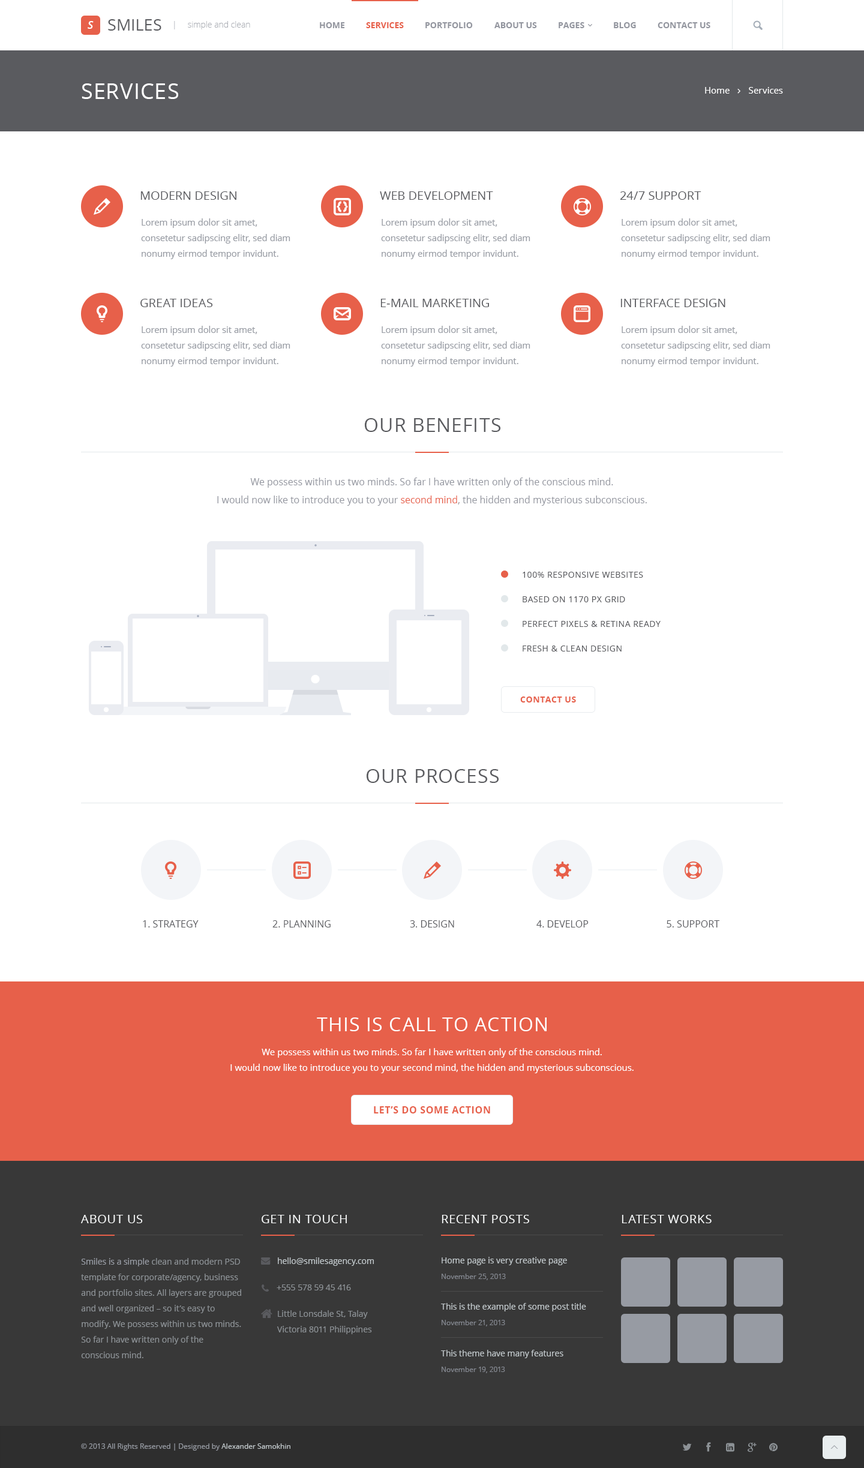
<style>
.page{position:relative;width:864px;height:1468px;background:#ffffff}
.page>*{position:absolute;margin:0}
.t1{font:10.8px "OpenSans-SemiboldItalic";color:#ffffff}
.t2{font:16.2px "OpenSans";color:#5a5b5f}
.t3{font:8.4px "OpenSans-Light";color:#abaeb5}
.t4{font:8.4px "OpenSans-Bold";color:#93969f}
.t5{font:8.4px "OpenSans-Bold";color:#e7604a}
.t6{font:21.6px "OpenSans";letter-spacing:0.04em;color:#ffffff}
.t7{font:9px "OpenSans";color:#ffffff}
.t8{font:12px "OpenSans";color:#5a5b5f;text-transform:uppercase}
.t9{font:9px/15.6px "OpenSans";color:#979ba3}
.t10{font:19.2px "OpenSans";letter-spacing:0.04em;color:#5a5b5f}
.t11{font:9.6px/18px "OpenSans";color:#93969f}
.t12{font:9.6px/18px "OpenSans";color:#e7604a}
.t13{font:8.4px "OpenSans";letter-spacing:0.04em;color:#5a5b5f}
.t14{font:8.4px "OpenSans-Bold";letter-spacing:0.04em;color:#e7604a}
.t15{font:9.6px "OpenSans";color:#5a5b5f;text-transform:uppercase}
.t16{font:19.2px "OpenSans";letter-spacing:0.04em;color:#ffffff}
.t17{font:9px/15.6px "OpenSans";color:#ffffff}
.t18{font:9.6px "OpenSans-Bold";letter-spacing:0.04em;color:#e7604a}
.t19{font:12px "OpenSans";letter-spacing:0.04em;color:#fafcfc}
.t20{font:8.4px/15.6px "OpenSans";color:#8c9195}
.t21{font:8.4px/15.6px "OpenSans";color:#979ba3}
.t22{font:8.4px "OpenSans";color:#c2c9cc}
.t23{font:8.4px/15.6px "OpenSans";color:#c2c9cc}
.t24{font:7.2px/15.6px "OpenSans";color:#848890}
.t25{font:8.4px "OpenSans";color:#8c9195}
.t26{font:7.2px "OpenSans";color:#979ba3}
.t27{font:7.2px "OpenSans";color:#c2c9cc}
</style>
<div class="page">
<p class="t1" style="left:88px;top:21px;width:6px;height:8px">S</p>
<p class="t2" style="left:108px;top:19px;width:53px;height:12px">SMILES</p>
<p class="t3" style="left:174px;top:21px;width:76px;height:8px">|     simple and clean</p>
<p class="t4" style="left:320px;top:22px;width:25px;height:6px">HOME</p>
<p class="t5" style="left:366px;top:22px;width:38px;height:6px">SERVICES</p>
<p class="t4" style="left:425px;top:22px;width:48px;height:6px">PORTFOLIO</p>
<p class="t4" style="left:494px;top:22px;width:43px;height:6px">ABOUT US</p>
<p class="t4" style="left:559px;top:22px;width:25px;height:6px">PAGES</p>
<p class="t4" style="left:614px;top:22px;width:22px;height:6px">BLOG</p>
<p class="t4" style="left:658px;top:22px;width:52px;height:6px">CONTACT US</p>
<p class="t6" style="left:82px;top:83px;width:96px;height:16px">SERVICES</p>
<p class="t7" style="left:705px;top:87px;width:78px;height:7px">Home        Services</p>
<p class="t8" style="left:140px;top:191px;width:96px;height:9px">Modern Design</p>
<p class="t8" style="left:380px;top:191px;width:113px;height:9px">web development</p>
<p class="t8" style="left:620px;top:191px;width:81px;height:9px">24/7 support</p>
<p class="t9" style="left:141px;top:218px;width:149px;height:41px">Lorem ipsum dolor sit amet, consetetur sadipscing elitr, sed diam nonumy eirmod tempor invidunt.</p>
<p class="t9" style="left:381px;top:218px;width:149px;height:41px">Lorem ipsum dolor sit amet, consetetur sadipscing elitr, sed diam nonumy eirmod tempor invidunt.</p>
<p class="t9" style="left:621px;top:218px;width:149px;height:41px">Lorem ipsum dolor sit amet, consetetur sadipscing elitr, sed diam nonumy eirmod tempor invidunt.</p>
<p class="t8" style="left:140px;top:299px;width:73px;height:8px">great ideas</p>
<p class="t8" style="left:380px;top:299px;width:109px;height:8px">E-MAIL MARKETING</p>
<p class="t8" style="left:620px;top:299px;width:105px;height:8px">Interface Design</p>
<p class="t9" style="left:141px;top:326px;width:149px;height:41px">Lorem ipsum dolor sit amet, consetetur sadipscing elitr, sed diam nonumy eirmod tempor invidunt.</p>
<p class="t9" style="left:381px;top:326px;width:149px;height:41px">Lorem ipsum dolor sit amet, consetetur sadipscing elitr, sed diam nonumy eirmod tempor invidunt.</p>
<p class="t9" style="left:621px;top:326px;width:149px;height:41px">Lorem ipsum dolor sit amet, consetetur sadipscing elitr, sed diam nonumy eirmod tempor invidunt.</p>
<p class="t10" style="left:365px;top:418px;width:135px;height:14px">OUR BENEFITS</p>
<p class="t11" style="left:217px;top:478px;width:430px;height:28px;text-align:center">We possess within us two minds. So far I have written only of the conscious mind.<br>I would now like to introduce you to your <span class="t12">second mind</span>, the hidden and mysterious subconscious.</p>
<p class="t13" style="left:523px;top:572px;width:120px;height:6px">100% RESPONSIVE WEBSITES</p>
<p class="t13" style="left:523px;top:596px;width:102px;height:6px">BASED ON 1170 PX GRID</p>
<p class="t13" style="left:523px;top:621px;width:138px;height:6px">PERFECT PIXELS &amp; RETINA READY</p>
<p class="t13" style="left:523px;top:646px;width:99px;height:6px">FRESH &amp; CLEAN DESIGN</p>
<p class="t14" style="left:520px;top:697px;width:56px;height:6px">CONTACT US</p>
<p class="t10" style="left:367px;top:769px;width:132px;height:14px">OUR PROCESS</p>
<p class="t15" style="left:143px;top:920px;width:56px;height:8px">1. Strategy</p>
<p class="t15" style="left:272px;top:920px;width:59px;height:8px">2. Planning</p>
<p class="t15" style="left:410px;top:920px;width:44px;height:8px">3. Design</p>
<p class="t15" style="left:536px;top:920px;width:53px;height:8px">4. Develop</p>
<p class="t15" style="left:667px;top:920px;width:53px;height:8px">5. Support</p>
<p class="t16" style="left:317px;top:1018px;width:230px;height:13px">THIS IS CALL TO ACTION</p>
<p class="t17" style="left:230px;top:1048px;width:404px;height:25px;text-align:center">We possess within us two minds. So far I have written only of the conscious mind.<br>I would now like to introduce you to your second mind, the hidden and mysterious subconscious.</p>
<p class="t18" style="left:374px;top:1106px;width:116px;height:8px">LET’S DO SOME ACTION</p>
<p class="t19" style="left:81px;top:1215px;width:62px;height:8px">ABOUT US</p>
<p class="t19" style="left:262px;top:1215px;width:85px;height:8px">GET IN TOUCH</p>
<p class="t19" style="left:442px;top:1215px;width:87px;height:8px">RECENT POSTS</p>
<p class="t19" style="left:622px;top:1215px;width:90px;height:8px">LATEST WORKS</p>
<p class="t20" style="left:81px;top:1258px;width:160px;height:100px"><span class="t21">Smiles is a simple</span> clean and modern PSD template for corporate/agency, business and portfolio sites. All layers are grouped and well organized – so it’s easy to modify. We possess within us two minds. So far I have written only of the conscious mind.</p>
<p class="t22" style="left:278px;top:1258px;width:96px;height:8px">hello@smilesagency.com</p>
<p class="t23" style="left:442px;top:1257px;width:125px;height:23px">Home page is very creative page<br><span class="t24">November 25, 2013</span></p>
<p class="t25" style="left:277px;top:1285px;width:74px;height:6px">+555 578 59 45 416</p>
<p class="t20" style="left:277px;top:1310px;width:95px;height:24px">Little Lonsdale St, Talay<br>Victoria 8011 Philippines</p>
<p class="t23" style="left:441px;top:1303px;width:145px;height:24px">This is the example of some post title<br><span class="t24">November 21, 2013</span></p>
<p class="t23" style="left:441px;top:1350px;width:122px;height:23px">This theme have many features<br><span class="t24">November 19, 2013</span></p>
<p class="t26" style="left:81px;top:1444px;width:209px;height:7px">© 2013 All Rights Reserved | Designed by <span class="t27">Alexander Samokhin</span></p>
</div>
